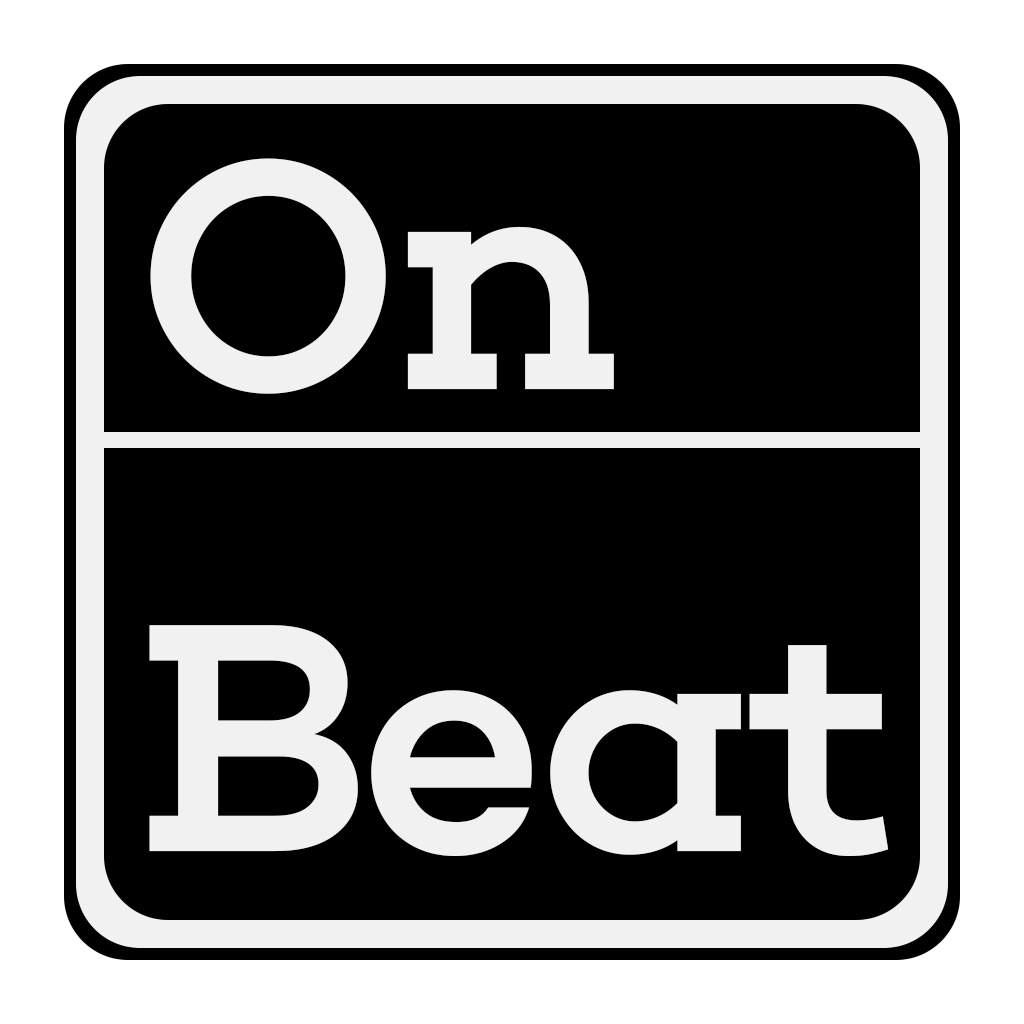
<style>
.page{position:relative;width:1024px;height:1024px;background:#000000}
.page>*{position:absolute;margin:0}
.t1{font:332px "Choplin-Medium-DEMO";color:#f1f1f2}
</style>
<div class="page">
<p class="t1" style="left:150px;top:158px;width:464px;height:236px">On</p>
<p class="t1" style="left:149px;top:625px;width:740px;height:231px">Beat</p>
</div>
